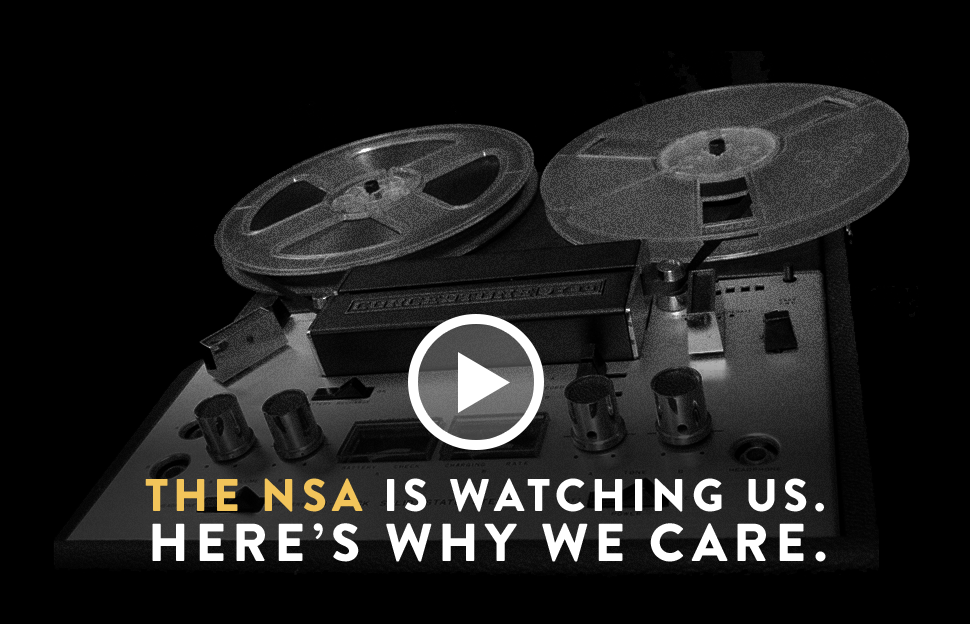
<style>
.page{position:relative;width:970px;height:624px;background:#000000}
.page>*{position:absolute;margin:0}
.t1{font:45.6px "BrandonGrotesque-Black";letter-spacing:0.12em;color:#ffffff}
.t2{font:45.6px "BrandonGrotesque-Black";letter-spacing:0.12em;color:#f2c45a}
.t3{font:53px "BrandonGrotesque-Black";letter-spacing:0.12em;color:#ffffff}
</style>
<div class="page">
<p class="t1" style="left:145px;top:478px;width:679px;height:34px"><span class="t2">THE NSA </span>IS WATCHING US.</p>
<p class="t3" style="left:152px;top:523px;width:674px;height:39px">HERE’S WHY WE CARE.</p>
</div>
